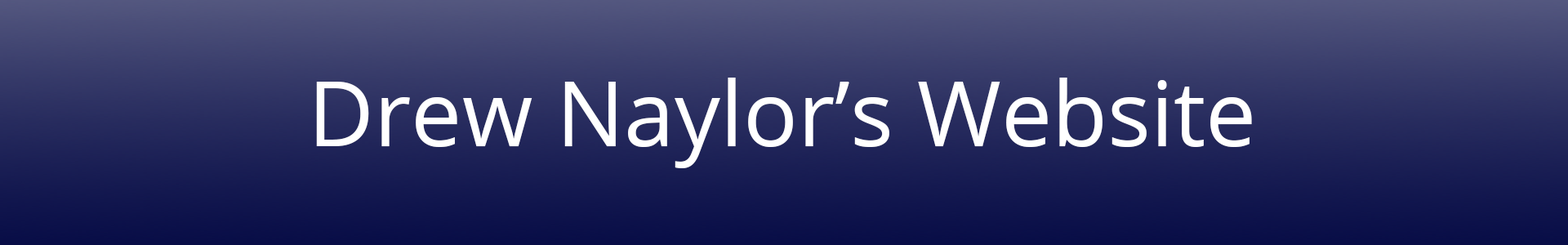
<style>
.page{position:relative;width:1568px;height:245px}
.page>*{position:absolute;margin:0}
.t1{font:90.6px "OpenSans";color:#ffffff}
</style>
<div class="page">
<p class="t1" style="left:316px;top:78px;width:936px;height:90px">Drew Naylor’s Website</p>
</div>
